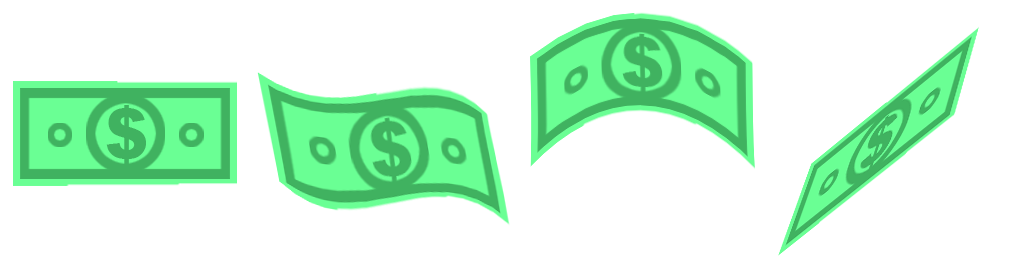
<style>
.page{position:relative;width:1024px;height:256px;background:#ffffff}
.page>*{position:absolute;margin:0}
.t1{font:69.4px "Arial-Black";letter-spacing:-0.01em;color:#40b260;scale:0.93 1}
</style>
<div class="page">
<p class="t1" style="left:106px;top:105px;width:40px;height:60px">$</p>
</div>
